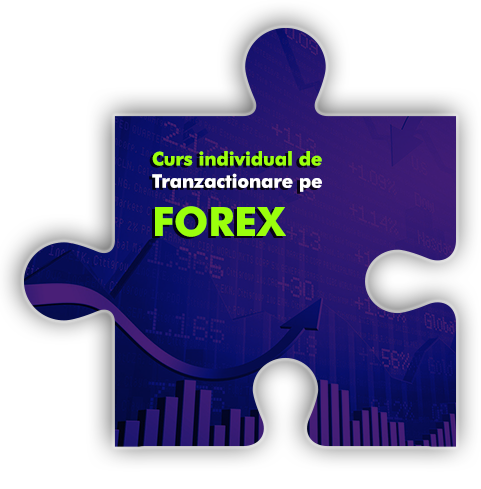
<style>
.page{position:relative;width:481px;height:489px;background:#ffffff}
.page>*{position:absolute;margin:0}
.t1{font:18.6px "FuturaBT-Bold";color:#9bff0c}
.t2{font:18.6px "FuturaBT-Bold";color:#ffffff}
.t3{font:40.2px "FuturaBT-Bold";color:#9bff0c}
</style>
<div class="page">
<p class="t1" style="left:152px;top:151px;width:170px;height:86px">Curs individual de<br><span class="t2">Tranzactionare pe<br></span><span class="t3">FOREX</span></p>
</div>
